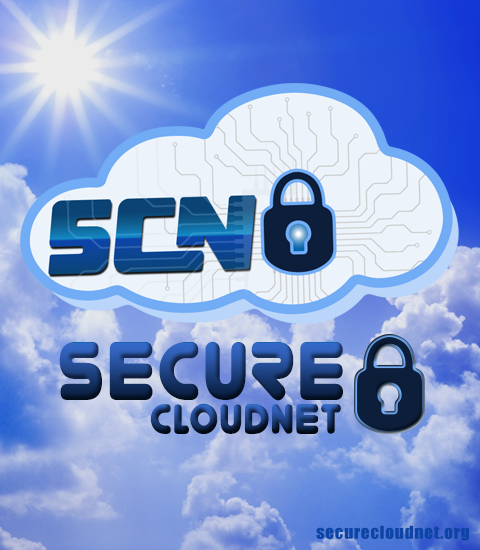
<style>
.page{position:relative;width:480px;height:550px}
.page>*{position:absolute;margin:0}
.t1{font:77.9px "YoureGone-Regular";letter-spacing:0.025em;scale:0.89 1}
.t2{font:39.6px "YoureGone-Regular";letter-spacing:0.025em;scale:0.89 1}
.t3{font:16.5px "Impact";letter-spacing:0.025em;color:#0c45a5;scale:1.09 1}
</style>
<div class="page">
<p class="t1" style="left:59px;top:342px;width:284px;height:59px">SECURE</p>
<p class="t2" style="left:150px;top:403px;width:191px;height:31px">CLOUDNET</p>
<p class="t3" style="left:316px;top:525px;width:153px;height:16px">securecloudnet.org</p>
</div>
